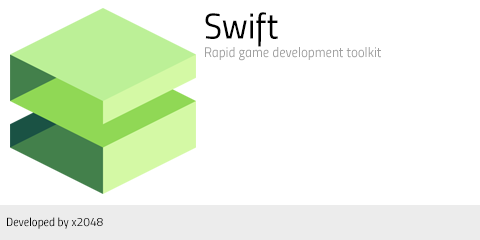
<style>
.page{position:relative;width:480px;height:240px;background:#ffffff}
.page>*{position:absolute;margin:0}
.t1{font:36px "Titillium-RegularUpright";color:#000000}
.t2{font:14px "Titillium-RegularUpright";color:#a0a0a0}
.t3{font:12px "Titillium-RegularUpright";color:#000000}
</style>
<div class="page">
<p class="t1" style="left:205px;top:12px;width:73px;height:35px">Swift</p>
<p class="t2" style="left:205px;top:47px;width:176px;height:14px">Rapid game development toolkit</p>
<p class="t3" style="left:7px;top:217px;width:96px;height:12px">Developed by x2048</p>
</div>
